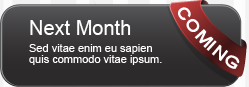
<style>
.page{position:relative;width:249px;height:87px}
.page>*{position:absolute;margin:0}
.t1{font:22px "ArialMT";color:#ffffff;font-variant:small-caps}
.t2{font:20px "ArialMT";color:#ffffff}
.t3{font:11px/11px "ArialMT";color:#ffffff}
</style>
<div class="page">
<p class="t1" style="left:178px;top:7px;width:62px;height:62px;rotate:45deg">coming</p>
<p class="t2" style="left:30px;top:20px;width:101px;height:15px">Next Month</p>
<p class="t3" style="left:29px;top:44px;width:133px;height:21px">Sed vitae enim eu sapien<br>quis commodo vitae ipsum.</p>
</div>
